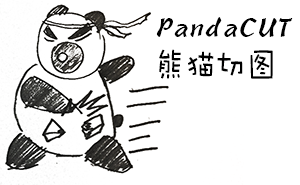
<style>
.page{position:relative;width:300px;height:185px;background:#ffffff}
.page>*{position:absolute;margin:0}
.t1{font:37.8px "STBaoli-SC-Regular";color:#000000;scale:0.8 1}
.t2{font:37.8px "DFWaWaSC-W5";color:#000000;scale:0.8 1}
</style>
<div class="page">
<p class="t1" style="left:156px;top:17px;width:137px;height:20px">PandaCUT</p>
<p class="t2" style="left:159px;top:49px;width:114px;height:30px">熊猫切图</p>
</div>
